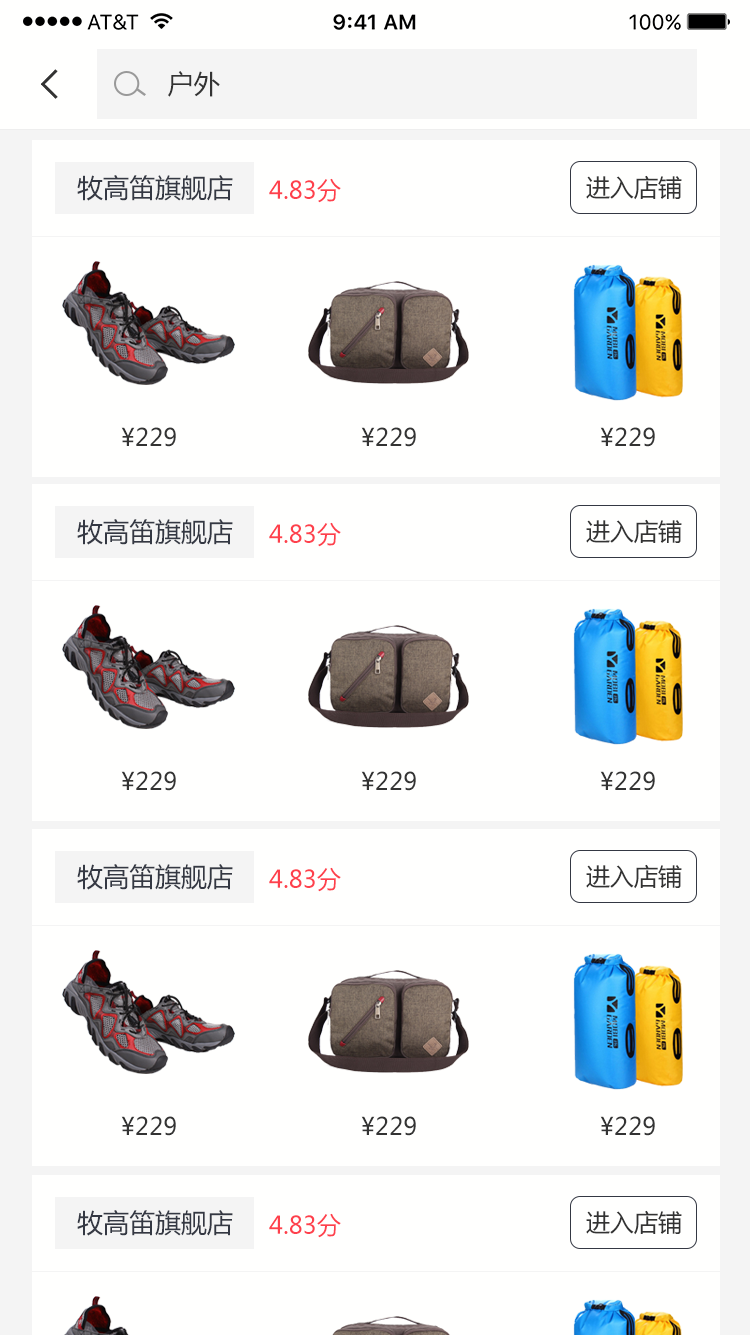
<style>
.page{position:relative;width:750px;height:1335px;background:#fffffe}
.page>*{position:absolute;margin:0}
.t1{font:26px "MicrosoftYaHei";color:#333333}
.t2{font:26px "MicrosoftYaHei";color:#343843}
.t3{font:24px "MicrosoftYaHei";color:#fe404c}
.t4{font:24px "MicrosoftYaHei";color:#333333}
</style>
<div class="page">
<p class="t1" style="left:168px;top:71px;width:52px;height:26px">户外</p>
<p class="t2" style="left:77px;top:175px;width:156px;height:26px">牧高笛旗舰店</p>
<p class="t3" style="left:269px;top:178px;width:72px;height:25px">4.83分</p>
<p class="t4" style="left:586px;top:175px;width:96px;height:25px">进入店铺</p>
<p class="t4" style="left:121px;top:427px;width:55px;height:20px">¥229</p>
<p class="t4" style="left:361px;top:427px;width:55px;height:20px">¥229</p>
<p class="t4" style="left:600px;top:427px;width:55px;height:20px">¥229</p>
<p class="t2" style="left:77px;top:519px;width:156px;height:26px">牧高笛旗舰店</p>
<p class="t4" style="left:586px;top:519px;width:96px;height:25px">进入店铺</p>
<p class="t3" style="left:269px;top:522px;width:72px;height:25px">4.83分</p>
<p class="t4" style="left:121px;top:771px;width:55px;height:20px">¥229</p>
<p class="t4" style="left:361px;top:771px;width:55px;height:20px">¥229</p>
<p class="t4" style="left:600px;top:771px;width:55px;height:20px">¥229</p>
<p class="t2" style="left:77px;top:864px;width:156px;height:26px">牧高笛旗舰店</p>
<p class="t3" style="left:269px;top:867px;width:72px;height:25px">4.83分</p>
<p class="t4" style="left:586px;top:864px;width:96px;height:25px">进入店铺</p>
<p class="t4" style="left:121px;top:1116px;width:55px;height:20px">¥229</p>
<p class="t4" style="left:361px;top:1116px;width:55px;height:20px">¥229</p>
<p class="t4" style="left:600px;top:1116px;width:55px;height:20px">¥229</p>
<p class="t2" style="left:77px;top:1210px;width:156px;height:26px">牧高笛旗舰店</p>
<p class="t3" style="left:269px;top:1213px;width:72px;height:25px">4.83分</p>
<p class="t4" style="left:586px;top:1210px;width:96px;height:25px">进入店铺</p>
</div>
